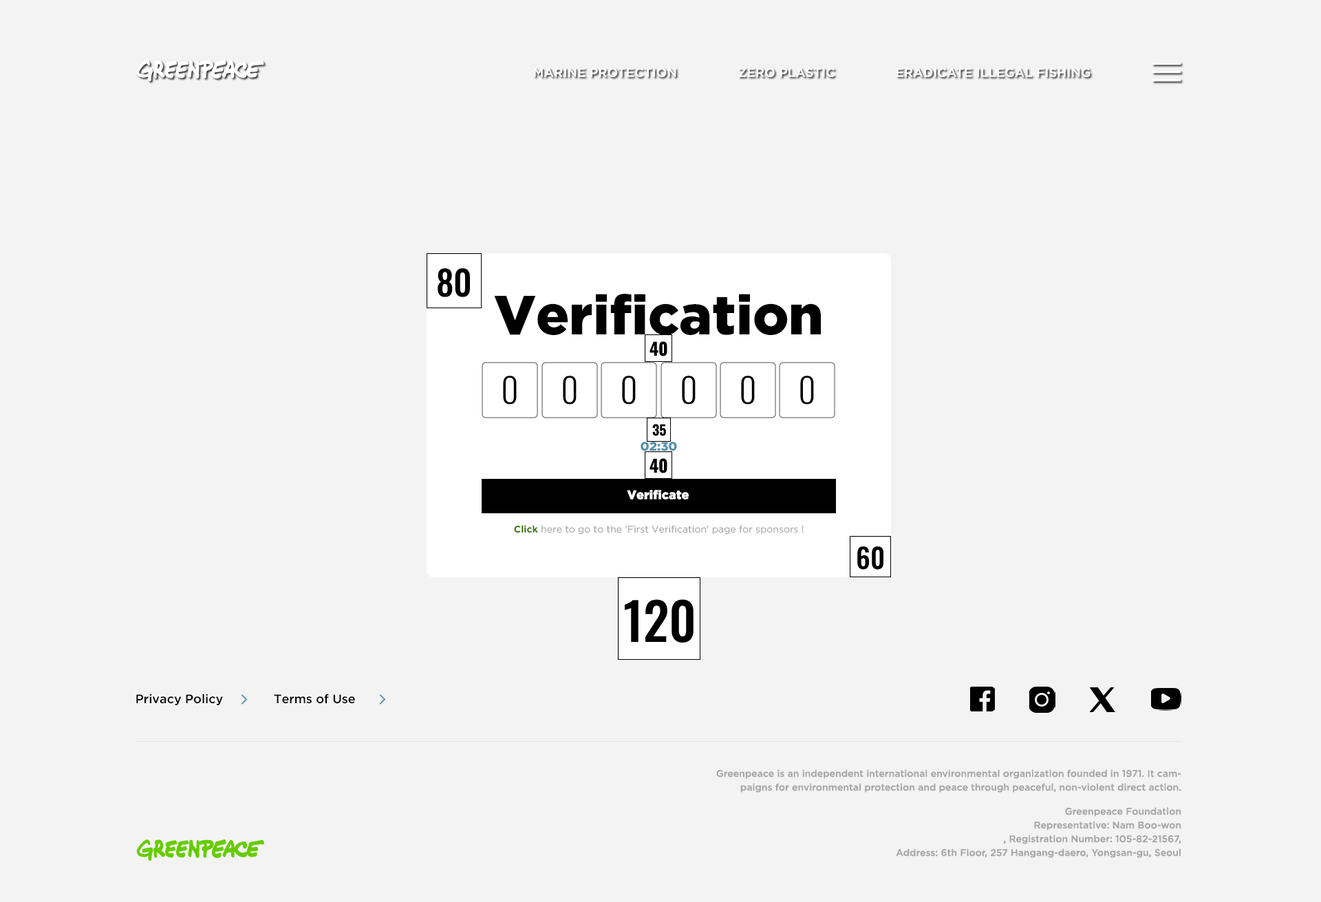
<style>
.page{position:relative;width:1321px;height:902px;background:#f3f3f3}
.page>*{position:absolute;margin:0}
.t1{font:12.4px "GothamPro-Medium";color:#ffffff;text-transform:uppercase}
.t2{font:55.1px "GothamPro-Black";color:#000000}
.t3{font:34.4px "Oswald-Light";color:#000000}
.t4{font:12.4px "GothamPro-Black";color:#5591af}
.t5{font:12.4px "GothamPro-Black";color:#ffffff}
.t6{font:9.6px "GothamPro";color:#a6a6a6}
.t7{font:9.6px "GothamPro-Bold";color:#3c7800}
.t8{font:12.4px "GothamPro-Medium";color:#000000}
.t9{font:9.6px/13.8px "GothamPro-Medium";color:#a6a6a6}
</style>
<div class="page">
<p class="t1" style="left:534px;top:67px;width:143px;height:10px">Marine protection</p>
<p class="t1" style="left:739px;top:67px;width:97px;height:10px">Zero plastic</p>
<p class="t1" style="left:897px;top:67px;width:194px;height:10px">Eradicate illegal fishing</p>
<p class="t2" style="left:494px;top:294px;width:327px;height:41px">Verification</p>
<p class="t3" style="left:503px;top:376px;width:14px;height:29px">0</p>
<p class="t3" style="left:563px;top:376px;width:14px;height:29px">0</p>
<p class="t3" style="left:622px;top:376px;width:14px;height:29px">0</p>
<p class="t3" style="left:682px;top:376px;width:14px;height:29px">0</p>
<p class="t3" style="left:741px;top:376px;width:14px;height:29px">0</p>
<p class="t3" style="left:800px;top:376px;width:14px;height:29px">0</p>
<p class="t4" style="left:641px;top:442px;width:36px;height:10px">02:30</p>
<p class="t5" style="left:627px;top:490px;width:62px;height:10px">Verificate</p>
<p class="t6" style="left:514px;top:525px;width:290px;height:10px"><span class="t7">Click </span>here to go to the 'First Verification' page for sponsors !</p>
<p class="t8" style="left:136px;top:694px;width:87px;height:11px">Privacy Policy</p>
<p class="t8" style="left:274px;top:694px;width:81px;height:10px">Terms of Use</p>
<p class="t9" style="left:716px;top:769px;width:466px;height:24px;text-align:right">Greenpeace is an independent international environmental organization founded in 1971. It campaigns for environmental protection and peace through peaceful, non-violent direct action.</p>
<p class="t9" style="left:896px;top:807px;width:286px;height:51px;text-align:right">Greenpeace Foundation<br>Representative: Nam Boo-won<br>, Registration Number: 105-82-21567,<br>Address: 6th Floor, 257 Hangang-daero, Yongsan-gu, Seoul</p>
</div>
